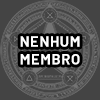
<style>
.page{position:relative;width:100px;height:100px;background:#444444}
.page>*{position:absolute;margin:0}
.t1{font:14.7px "Barlow-Bold";letter-spacing:0.05em;color:#ffffff}
</style>
<div class="page">
<p class="t1" style="left:20px;top:36px;width:60px;height:29px">NENHUM<br>MEMBRO</p>
</div>
